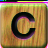
<style>
.page{position:relative;width:48px;height:48px}
.page>*{position:absolute;margin:0}
.t1{font:36px "HelveticaNeue-Bold";color:#070809}
</style>
<div class="page">
<p class="t1" style="left:11px;top:11px;width:25px;height:27px">C</p>
</div>
